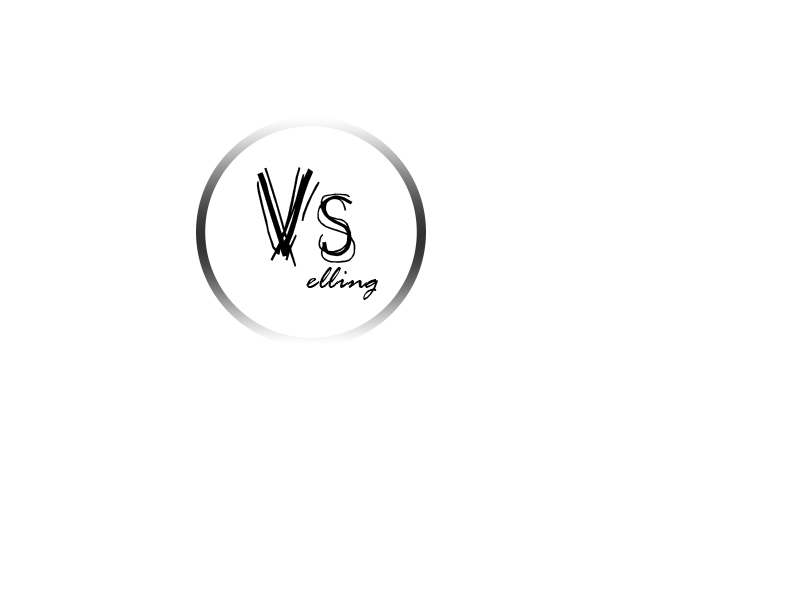
<style>
.page{position:relative;width:800px;height:600px;background:#ffffff}
.page>*{position:absolute;margin:0}
.t1{font:80px "OctemberScript";color:#000000}
.t2{font:60px "OctemberScript";color:#000000}
.t3{font:36px "RageItalic";color:#000000}
</style>
<div class="page">
<p class="t1" style="left:256px;top:167px;width:100px;height:100px">V<span class="t2">S</span></p>
<p class="t3" style="left:306px;top:267px;width:72px;height:33px">elling</p>
</div>
